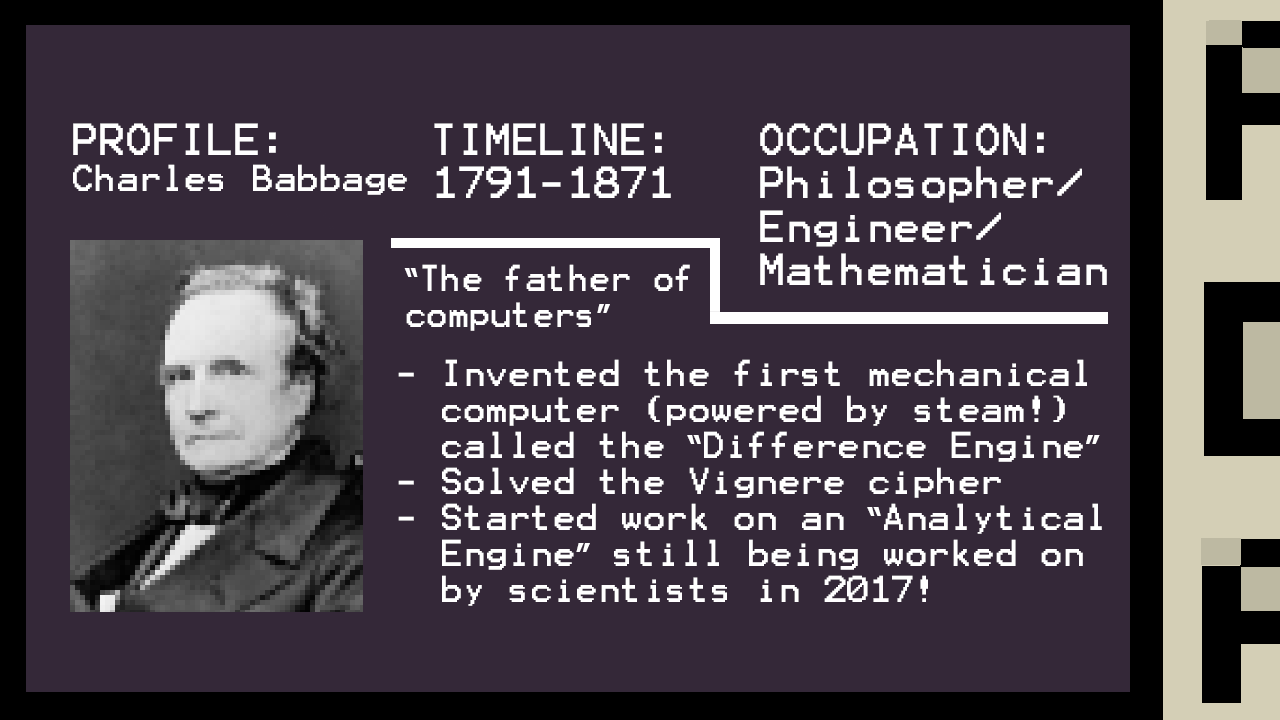
<style>
.page{position:relative;width:1280px;height:720px;background:#342838}
.page>*{position:absolute;margin:0}
.t1{font:30px "Terminal";color:#ffffff}
.t2{font:36px "Terminal";color:#ffffff}
.t3{font:30px "Terminal";color:#ffffff;scale:0.94 1}
.t4{font:30px "Tahoma-Bold";color:#ffffff;scale:0.94 1}
.t5{font:30px "Tahoma-Bold";color:#ffffff}
</style>
<div class="page">
<p class="t1" style="left:73px;top:123px;width:334px;height:72px"><span class="t2">PROFILE:<br></span>Charles Babbage</p>
<p class="t2" style="left:434px;top:123px;width:237px;height:75px">TIMELINE:<br>1791-1871</p>
<p class="t2" style="left:760px;top:123px;width:347px;height:162px">OCCUPATION:<br>Philosopher/<br>Engineer/<br>Mathematician</p>
<p class="t3" style="left:404px;top:264px;width:286px;height:67px"><span class="t4">“</span>The father of<br>computers<span class="t4">”</span></p>
<p class="t1" style="left:398px;top:359px;width:704px;height:247px">- Invented the first mechanical<br>  computer (powered by steam!)<br>  called the <span class="t5">“</span>Difference Engine<span class="t5">”<br></span>- Solved the Vignere cipher<br>- Started work on an <span class="t5">“</span>Analytical<br>  Engine<span class="t5">”</span> still being worked on<br>  by scientists in 2017!</p>
</div>
